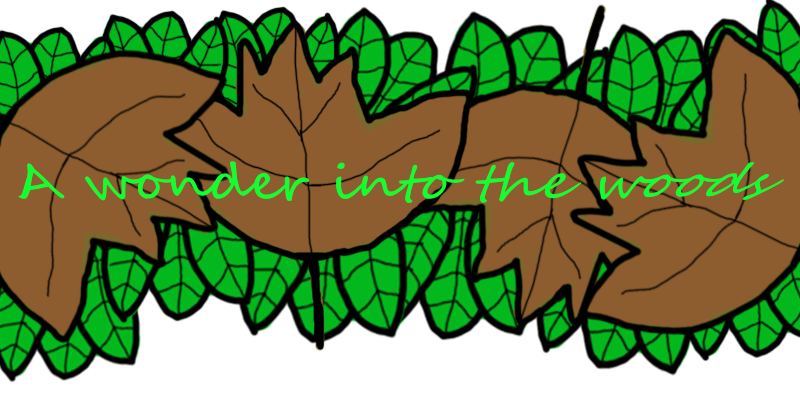
<style>
.page{position:relative;width:800px;height:400px;background:#8d5d2f}
.page>*{position:absolute;margin:0}
.t1{font:48px "SegoeScript";color:#10ff32}
</style>
<div class="page">
<p class="t1" style="left:18px;top:161px;width:766px;height:42px;rotate:-1deg">A wonder into the woods</p>
</div>
